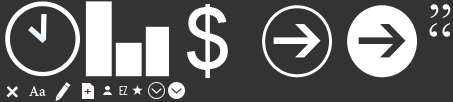
<style>
.page{position:relative;width:453px;height:102px;background:#333333}
.page>*{position:absolute;margin:0}
.t1{font:40px "AgencyFB-Reg";color:#ffffff}
.t2{font:15px "MinionPro-Regular";color:#ffffff}
.t3{font:17px "AgencyFB-Reg";color:#333333}
.t4{font:11.9px "AgencyFB-Reg";color:#f9f9f9}
</style>
<div class="page">
<p class="t1" style="left:6px;top:86px;width:12px;height:12px;rotate:46deg">+</p>
<p class="t2" style="left:29px;top:86px;width:17px;height:10px">Аа</p>
<p class="t3" style="left:84px;top:89px;width:7px;height:5px">+</p>
<p class="t4" style="left:119px;top:86px;width:9px;height:9px">EZ</p>
</div>
